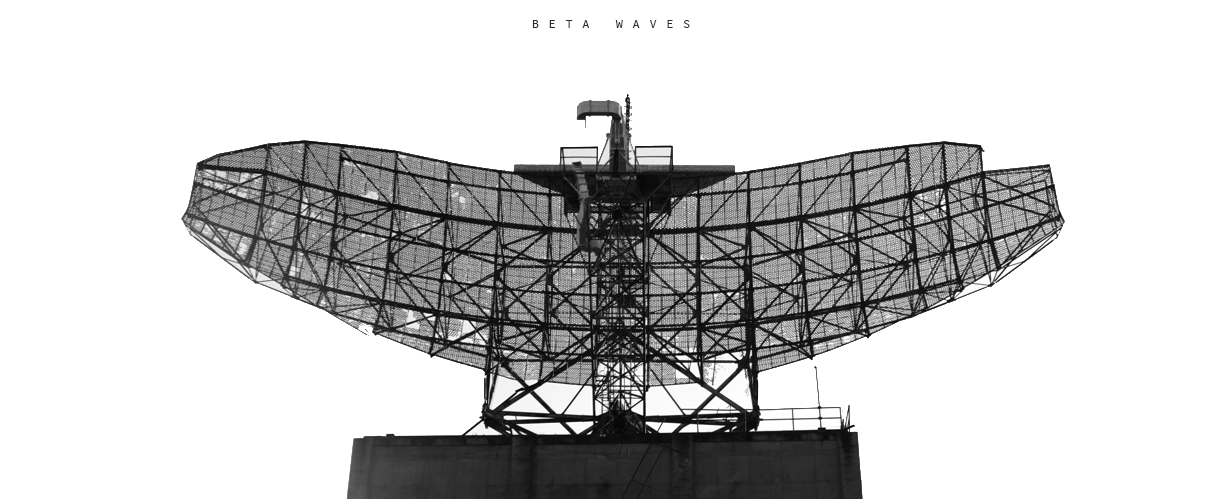
<style>
.page{position:relative;width:1232px;height:499px;background:#ffffff}
.page>*{position:absolute;margin:0}
.t1{font:12px "SourceCodePro-Regular";letter-spacing:0.8em;color:#2e2e2e;text-transform:uppercase}
</style>
<div class="page">
<p class="t1" style="left:532px;top:20px;width:158px;height:8px">beta waves</p>
</div>
